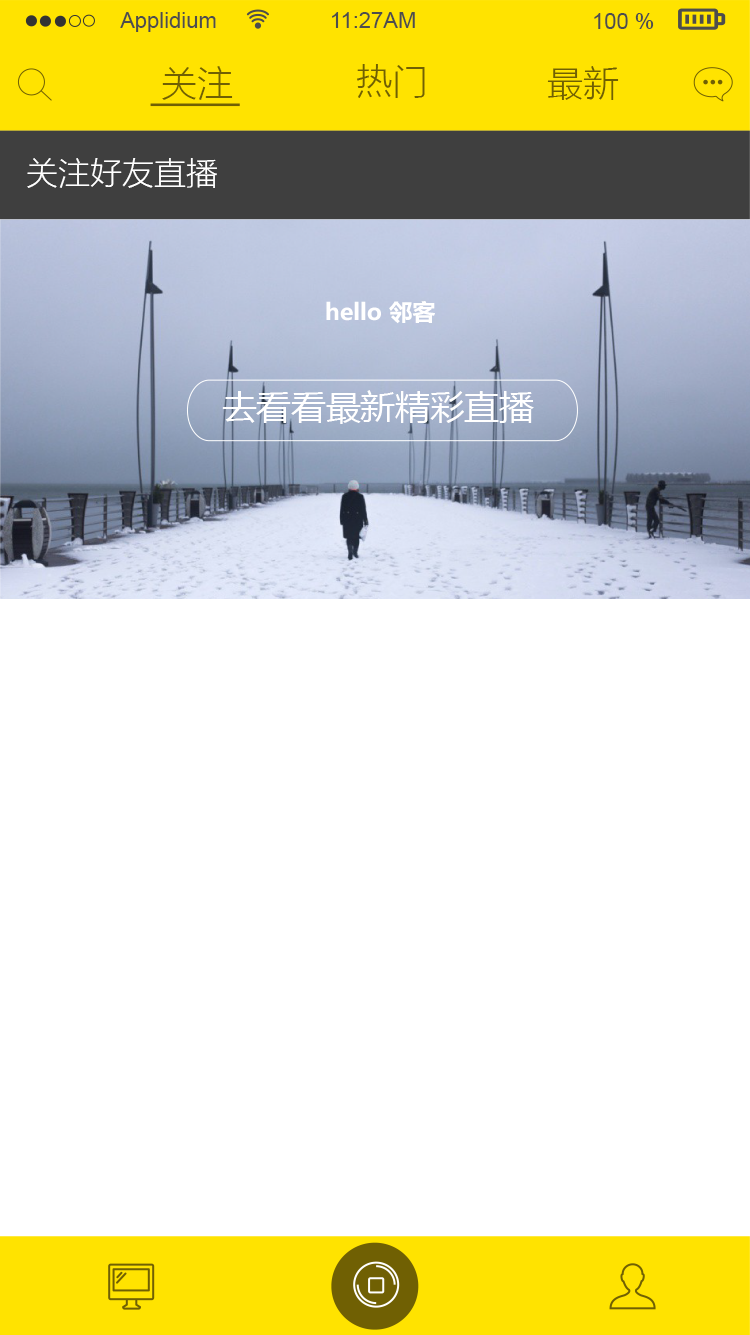
<style>
.page{position:relative;width:750px;height:1335px;background:#ffffff}
.page>*{position:absolute;margin:0}
.t1{font:22px "ArialMT";color:#4d4d4d}
.t2{font:36px "MicrosoftYaHeiLight";color:#706003}
.t3{font:32px "MicrosoftYaHeiLight";color:#ffffff}
.t4{font:22.7px "MicrosoftYaHei-Bold";color:#ffffff}
.t5{font:34px "MicrosoftYaHei";color:#ffffff}
</style>
<div class="page">
<p class="t1" style="left:120px;top:12px;width:96px;height:20px">Applidium</p>
<p class="t1" style="left:332px;top:12px;width:83px;height:16px">11:27AM</p>
<p class="t1" style="left:594px;top:13px;width:60px;height:16px">100 %</p>
<p class="t2" style="left:357px;top:64px;width:68px;height:34px">热门</p>
<p class="t2" style="left:162px;top:66px;width:71px;height:34px">关注</p>
<p class="t2" style="left:547px;top:66px;width:72px;height:34px">最新</p>
<p class="t3" style="left:27px;top:158px;width:190px;height:30px">关注好友直播</p>
<p class="t4" style="left:326px;top:301px;width:109px;height:23px">hello 邻客</p>
<p class="t5" style="left:222px;top:390px;width:312px;height:34px">去看看最新精彩直播</p>
</div>
